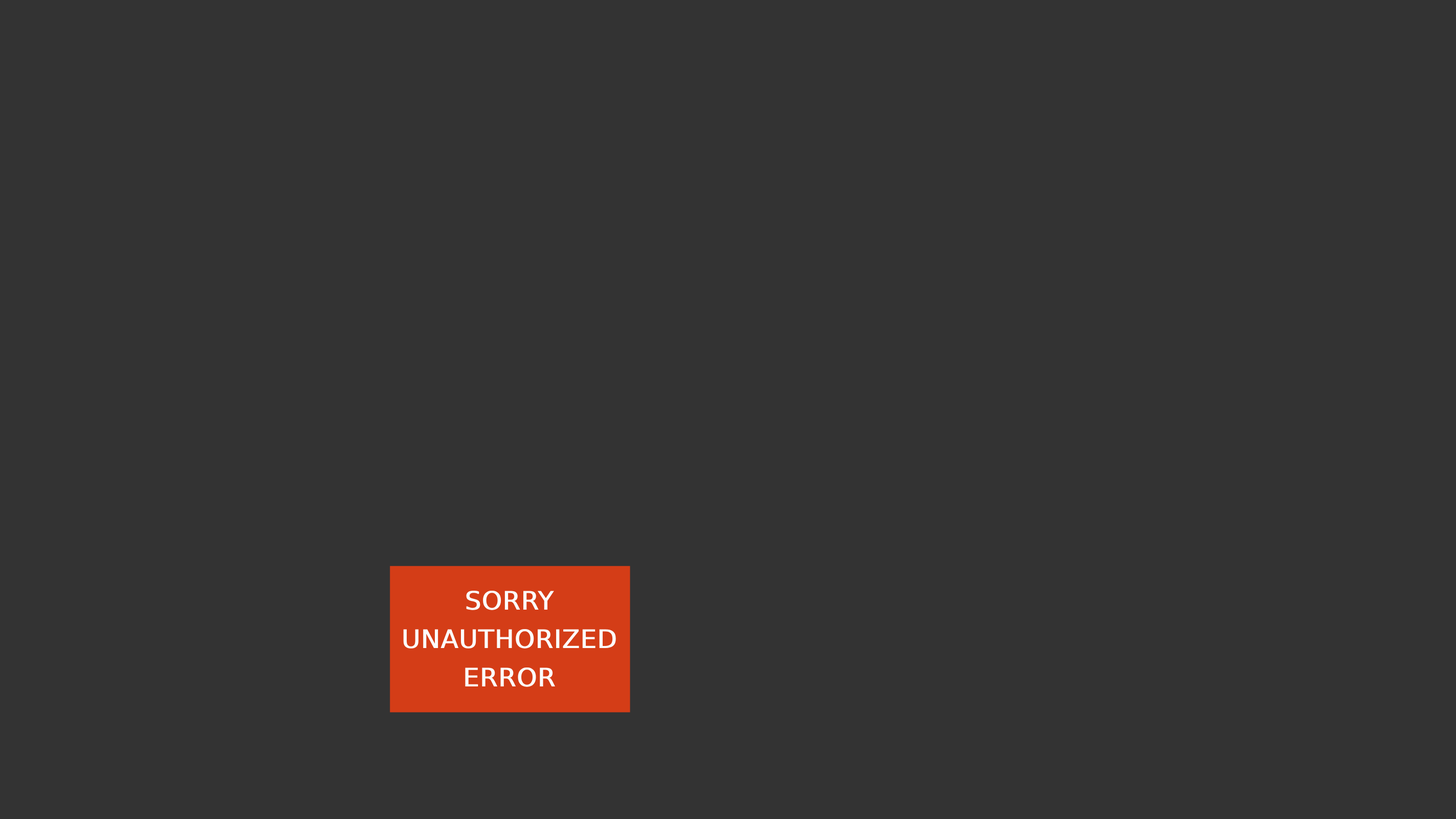
<style>
.page{position:relative;width:1456px;height:819px;background:#333333}
.page>*{position:absolute;margin:0}
.t1{font:25.6px/38.4px "DejaVuSans";color:#fcfcfc;font-weight:bold}
</style>
<div class="page">
<p class="t1" style="left:403px;top:590px;width:213px;height:97px;text-align:center">SORRY<br>UNAUTHORIZED<br>ERROR</p>
</div>
